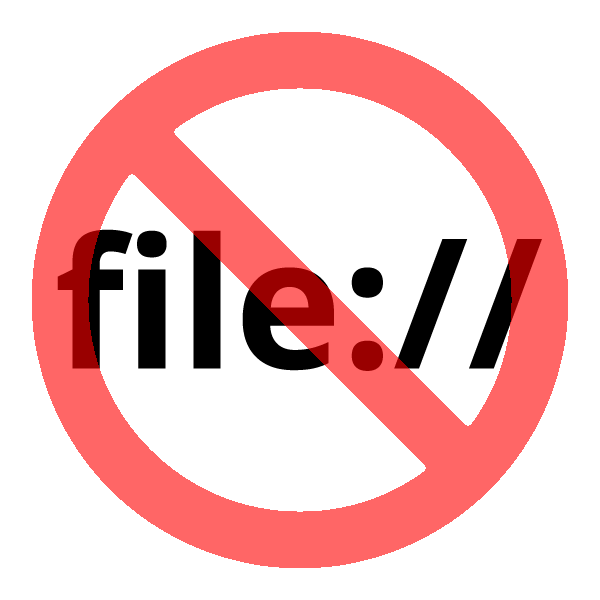
<style>
.page{position:relative;width:600px;height:600px;background:#ffffff}
.page>*{position:absolute;margin:0}
.t1{font:181px "OpenSans-Bold";color:#000000}
</style>
<div class="page">
<p class="t1" style="left:57px;top:229px;width:485px;height:142px">file://</p>
</div>
